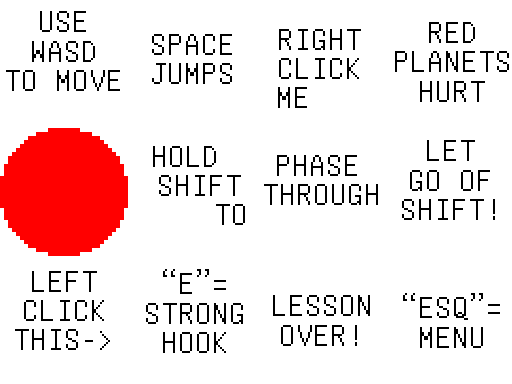
<style>
.page{position:relative;width:512px;height:384px;background:#ffffff}
.page>*{position:absolute;margin:0}
.t1{font:33.3px/29.2px "UnifontMedium";color:#000000}
</style>
<div class="page">
<p class="t1" style="left:6px;top:11px;width:114px;height:80px;text-align:center">USE<br>WASD<br>TO MOVE</p>
<p class="t1" style="left:278px;top:29px;width:83px;height:79px;text-align:center">RIGHT<br>CLICK<br> ME</p>
<p class="t1" style="left:152px;top:34px;width:80px;height:50px;text-align:center">SPACE<br>JUMPS</p>
<p class="t1" style="left:153px;top:146px;width:92px;height:79px">HOLD<br>SHIFT<br>TO</p>
<p class="t1" style="left:402px;top:140px;width:93px;height:80px;text-align:center">LET <br>GO OF SHIFT!</p>
<p class="t1" style="left:264px;top:155px;width:114px;height:50px">PHASE<br>THROUGH</p>
<p class="t1" style="left:146px;top:269px;width:97px;height:84px;text-align:center">“E”=<br>STRONG<br>HOOK</p>
<p class="t1" style="left:15px;top:271px;width:95px;height:79px;text-align:center">LEFT<br>CLICK<br>THIS-&gt;</p>
<p class="t1" style="left:403px;top:293px;width:97px;height:55px;text-align:center">“ESQ”=<br>MENU</p>
<p class="t1" style="left:273px;top:295px;width:97px;height:51px;text-align:center">LESSON<br>OVER!</p>
</div>
